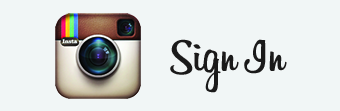
<style>
.page{position:relative;width:340px;height:111px;background:#f1f6f6}
.page>*{position:absolute;margin:0}
.t1{font:50.2px "Billabong";color:#1a1a1a}
</style>
<div class="page">
<p class="t1" style="left:170px;top:39px;width:117px;height:54px">Sign In</p>
</div>
